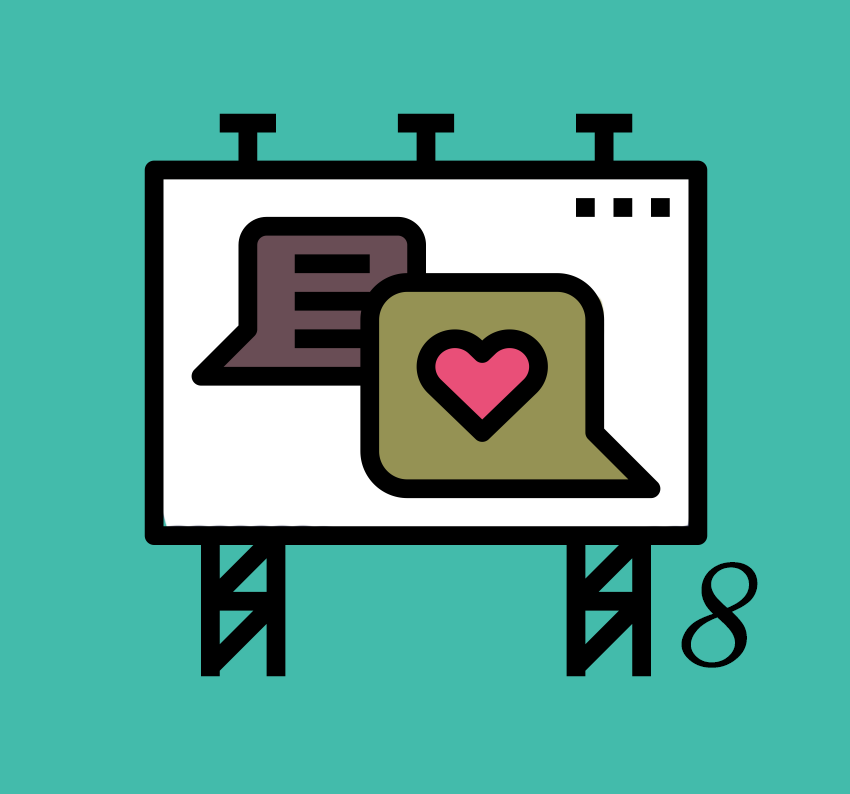
<style>
.page{position:relative;width:850px;height:794px;background:#43bbab}
.page>*{position:absolute;margin:0}
.t1{font:149.8px "CenturySchoolbook-Italic";color:#010101}
</style>
<div class="page">
<p class="t1" style="left:681px;top:562px;width:77px;height:106px">8</p>
</div>
